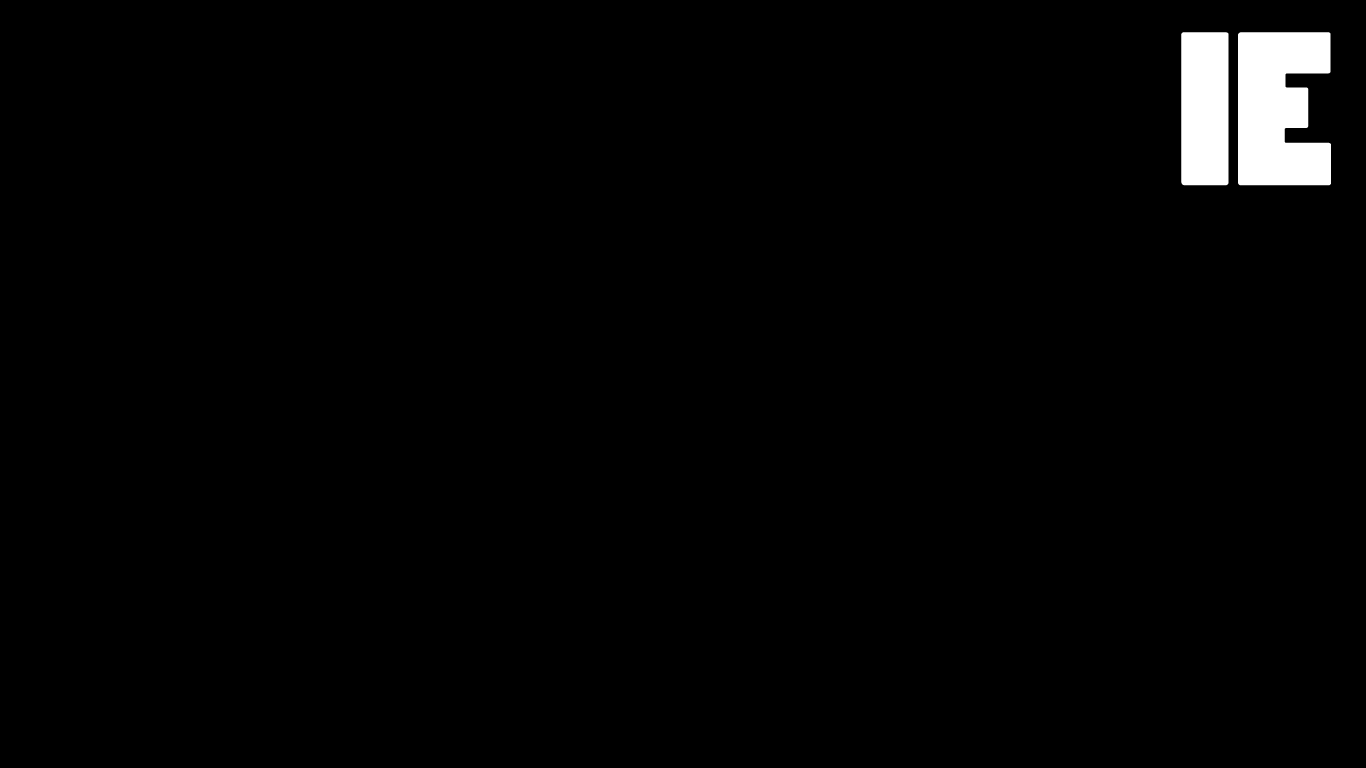
<style>
.page{position:relative;width:1366px;height:768px;background:#000000}
.page>*{position:absolute;margin:0}
.t1{font:203.5px "PoplarStd";color:#ffffff;scale:1.2 1}
</style>
<div class="page">
<p class="t1" style="left:1181px;top:32px;width:150px;height:154px">IE</p>
</div>
